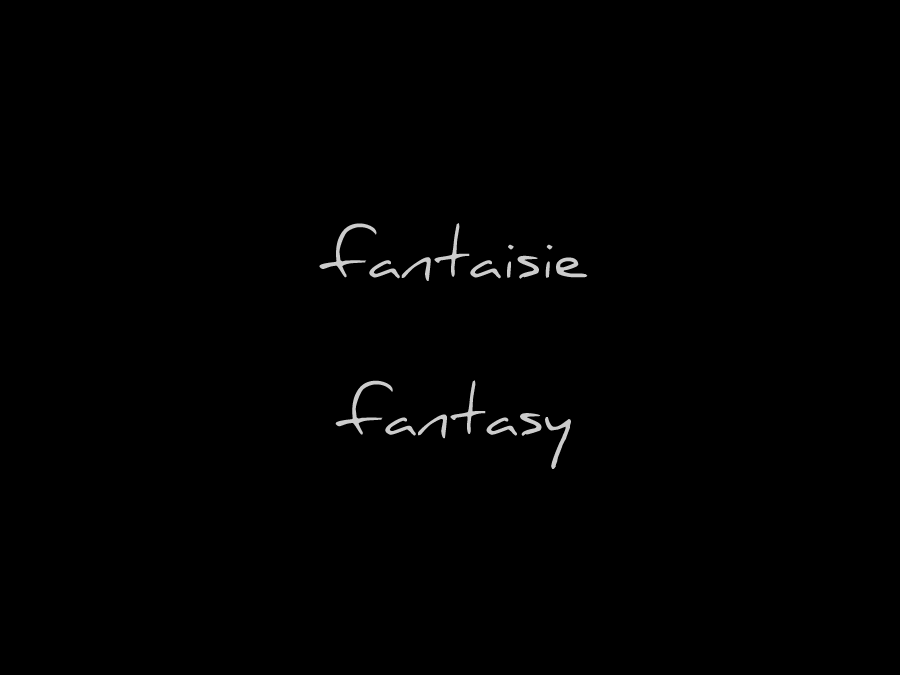
<style>
.page{position:relative;width:900px;height:675px;background:#000000}
.page>*{position:absolute;margin:0}
.t1{font:65.5px "Daniel";color:#cccccc}
</style>
<div class="page">
<p class="t1" style="left:319px;top:223px;width:269px;height:246px;text-align:center">fantaisie<br><br>fantasy</p>
</div>
